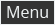
<style>
.page{position:relative;width:55px;height:25px;background:#333333}
.page>*{position:absolute;margin:0}
.t1{font:16px "OpenSans";color:#ecf0f1}
</style>
<div class="page">
<p class="t1" style="left:7px;top:6px;width:41px;height:12px">Menu</p>
</div>
